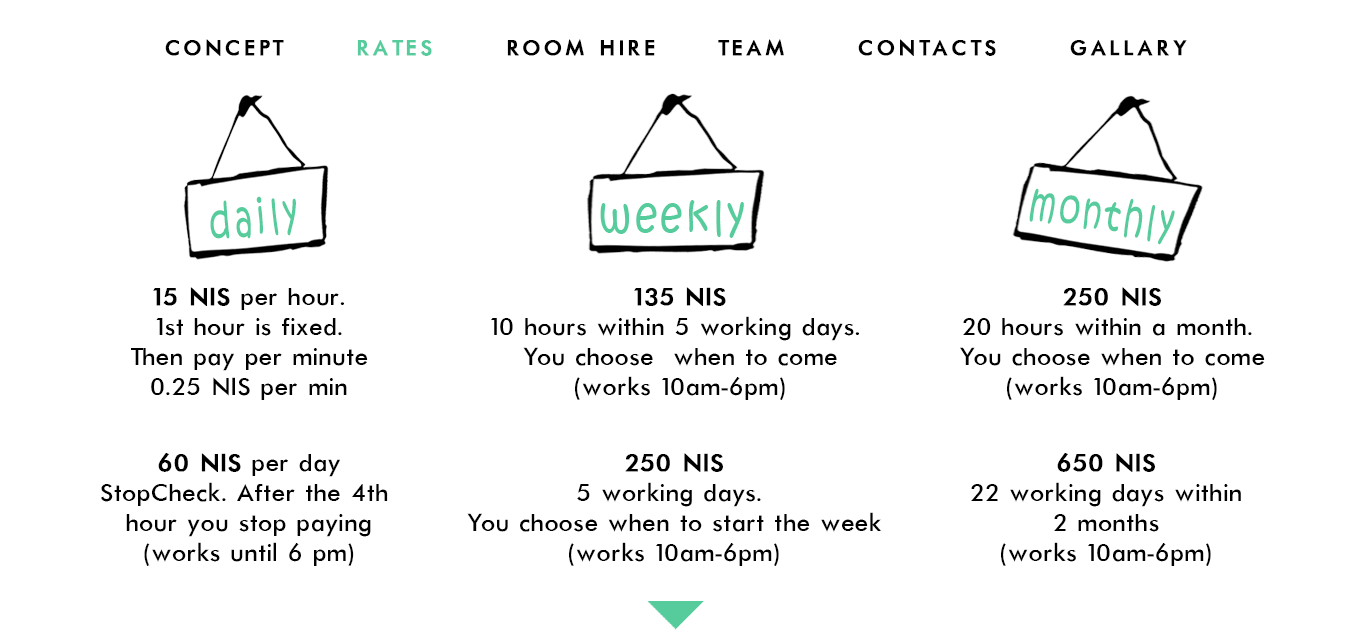
<style>
.page{position:relative;width:1351px;height:638px;background:#ffffff}
.page>*{position:absolute;margin:0}
.t1{font:24px "Futura-Normal";letter-spacing:0.12em;color:#000000;text-transform:uppercase;font-weight:bold}
.t2{font:24px "Futura-Normal";letter-spacing:0.12em;color:#56cc9d;text-transform:uppercase;font-weight:bold}
.t3{font:47.2px "KristenITC-Regular";letter-spacing:0.12em;color:#56cc9d;scale:0.71 1}
.t4{font:47px "KristenITC-Regular";letter-spacing:0.08em;color:#56cc9d;scale:0.71 1}
.t5{font:47.1px "KristenITC-Regular";letter-spacing:0.08em;color:#56cc9d;scale:0.86 1}
.t6{font:28px/30px "Futura-Normal";color:#000000}
.t7{font:28px/30px "Futura-Normal";color:#000000;font-weight:bold}
</style>
<div class="page">
<p class="t1" style="left:165px;top:39px;width:1022px;height:17px">concept      <span class="t2">rates</span>      room hire     team      contacts      gallary</p>
<p class="t3" style="left:210px;top:196px;width:86px;height:43px;rotate:-6deg">daily</p>
<p class="t4" style="left:1029px;top:188px;width:146px;height:57px;rotate:9deg">monthly</p>
<p class="t5" style="left:600px;top:200px;width:144px;height:38px">weekly</p>
<p class="t6" style="left:131px;top:287px;width:237px;height:113px;text-align:center"><span class="t7">15 NIS</span> per hour.<br>1st hour is fixed.<br>Then pay per minute<br>0.25 NIS per min</p>
<p class="t6" style="left:491px;top:287px;width:368px;height:113px;text-align:center"><span class="t7">135 NIS<br></span>10 hours within 5 working days. <br>You choose  when to come<br>(works 10am-6pm)</p>
<p class="t6" style="left:960px;top:287px;width:305px;height:113px;text-align:center"><span class="t7">250 NIS<br></span>20 hours within a month. <br>You choose when to come<br>(works 10am-6pm)</p>
<p class="t6" style="left:101px;top:453px;width:287px;height:113px;text-align:center"><span class="t7">60 NIS</span> per day<br>StopCheck. After the 4th <br>hour you stop paying<br>  (works until 6 pm)</p>
<p class="t6" style="left:467px;top:453px;width:415px;height:113px;text-align:center"><span class="t7">250 NIS<br></span>5 working days. <br>You choose when to start the week<br>(works 10am-6pm)</p>
<p class="t6" style="left:971px;top:453px;width:270px;height:113px;text-align:center"><span class="t7">650 NIS<br></span>22 working days within<br>2 months<br>(works 10am-6pm)</p>
</div>
